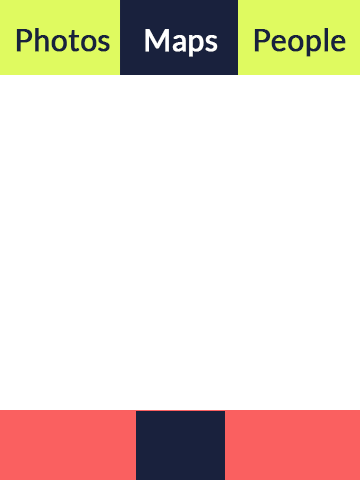
<style>
.page{position:relative;width:360px;height:480px;background:#ffffff}
.page>*{position:absolute;margin:0}
.t1{font:29.8px "Lato-Regular";color:#18213d;font-weight:bold}
.t2{font:29.8px "Lato-Regular";color:#ffffff;font-weight:bold}
</style>
<div class="page">
<p class="t1" style="left:16px;top:28px;width:94px;height:24px">Photos</p>
<p class="t2" style="left:145px;top:29px;width:73px;height:28px">Maps</p>
<p class="t1" style="left:254px;top:28px;width:92px;height:29px">People</p>
</div>
